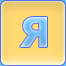
<style>
.page{position:relative;width:66px;height:66px}
.page>*{position:absolute;margin:0}
.t1{font:41px "Tahoma-Bold"}
</style>
<div class="page">
<p class="t1" style="left:20px;top:17px;width:27px;height:30px">Я</p>
<p class="t1" style="left:20px;top:17px;width:27px;height:30px">Я</p>
</div>
